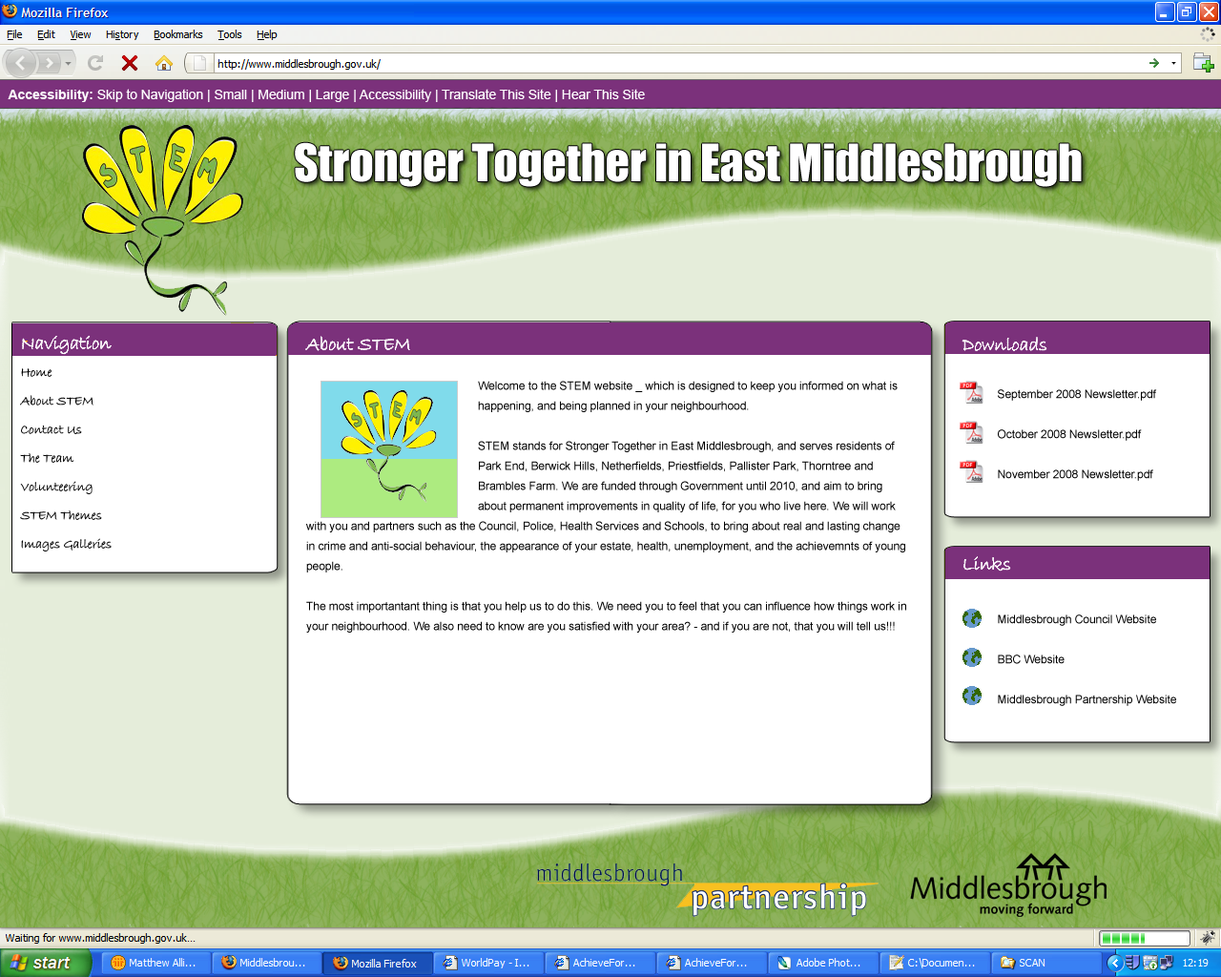
<style>
.page{position:relative;width:1221px;height:977px;background:#ffffff}
.page>*{position:absolute;margin:0}
.t1{font:13.4px "ArialMT";letter-spacing:-0.005em;color:#ffffff}
.t2{font:13.4px "Arial-BoldMT";letter-spacing:-0.005em;color:#ffffff}
.t3{font:47.7px "Impact";letter-spacing:-0.005em;color:#ffffff}
.t4{font:19.1px "BradleyHandITC";letter-spacing:-0.005em;color:#fffefe}
.t5{font:19.1px "BradleyHandITC";letter-spacing:-0.005em;color:#fffffe}
.t6{font:13.4px/28.6px "BradleyHandITC";letter-spacing:-0.005em;color:#000000}
.t7{font:11.4px/20px "ArialMT";letter-spacing:-0.005em;color:#000000}
.t8{font:19.1px "BradleyHandITC";letter-spacing:-0.005em;color:#ffffff}
</style>
<div class="page">
<p class="t1" style="left:8px;top:89px;width:637px;height:13px"><span class="t2">Accessibility:</span> Skip to Navigation | Small | Medium | Large | Accessibility | Translate This Site | Hear This Site</p>
<p class="t3" style="left:295px;top:142px;width:787px;height:45px">Stronger Together in East Middlesbrough</p>
<p class="t4" style="left:22px;top:336px;width:90px;height:18px">Navigation</p>
<p class="t5" style="left:305px;top:336px;width:105px;height:15px">About STEM</p>
<p class="t4" style="left:962px;top:337px;width:84px;height:14px">Downloads</p>
<p class="t6" style="left:20px;top:368px;width:92px;height:183px">Home<br>About STEM<br>Contact Us<br>The Team<br>Volunteering<br>STEM Themes<br>Images Galleries</p>
<p class="t7" style="left:306px;top:381px;width:600px;height:251px">Welcome to the STEM website _ which is designed to keep you informed on what is       happening, and being planned in your neighbourhood.<br><br>     STEM stands for Stronger Together in East Middlesbrough, and serves residents of       Park End, Berwick Hills, Netherfields, Priestfields, Pallister Park, Thorntree and        Brambles Farm. We are funded through Government until 2010, and aim to bring        about permanent improvements in quality of life, for you who live here. We will work with you and partners such as the Council, Police, Health Services and Schools, to bring about real and lasting change in crime and anti-social behaviour, the appearance of your estate, health, unemployment, and the achievemnts of young people.<br><br>The most importantant thing is that you help us to do this. We need you to feel that you can influence how things work in your neighbourhood. We also need to know are you satisfied with your area? - and if you are not, that you will tell us!!!</p>
<p class="t7" style="left:998px;top:389px;width:159px;height:92px">September 2008 Newsletter.pdf<br><br>October 2008 Newsletter.pdf<br><br>November 2008 Newsletter.pdf</p>
<p class="t8" style="left:963px;top:556px;width:47px;height:14px">Links</p>
<p class="t7" style="left:998px;top:614px;width:178px;height:92px">Middlesbrough Council Website<br><br>BBC Website<br><br>Middlesbrough Partnership Website</p>
</div>
